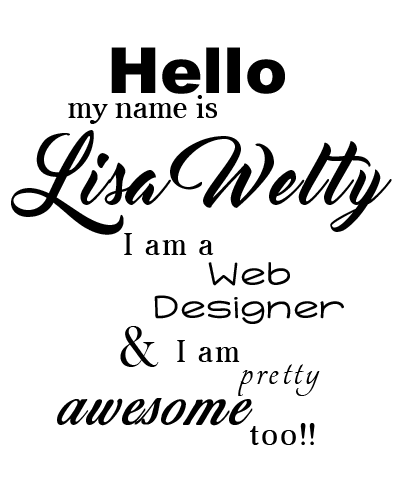
<style>
.page{position:relative;width:400px;height:489px;background:#ffffff}
.page>*{position:absolute;margin:0}
.t1{font:63.4px "Arial-Black";color:#000000}
.t2{font:31.3px "Aver";color:#000000}
.t3{font:70.6px "MasterOfBreak";letter-spacing:0.06em;color:#000000}
.t4{font:70.6px "MasterOfBreak";color:#000000}
.t5{font:31.3px "Aver";letter-spacing:0.06em;color:#000000}
.t6{font:36.6px "KGTightrope";letter-spacing:0.06em;color:#000000}
.t7{font:58.3px "BaskOldFace";color:#000000}
.t8{font:50.1px "Tangerine";letter-spacing:0.06em;color:#000000}
.t9{font:62.6px "BirdsofParadise";letter-spacing:0.06em;color:#000000}
</style>
<div class="page">
<p class="t1" style="left:111px;top:47px;width:174px;height:47px">Hello</p>
<p class="t2" style="left:68px;top:95px;width:149px;height:29px">my name is</p>
<p class="t3" style="left:11px;top:130px;width:381px;height:105px">L<span class="t4">is</span>a  Welty</p>
<p class="t5" style="left:124px;top:233px;width:90px;height:22px">I am a</p>
<p class="t6" style="left:154px;top:262px;width:190px;height:62px">Web Designer</p>
<p class="t7" style="left:120px;top:326px;width:39px;height:41px">&amp;</p>
<p class="t5" style="left:177px;top:340px;width:63px;height:22px">I am</p>
<p class="t8" style="left:238px;top:364px;width:82px;height:32px">pretty</p>
<p class="t9" style="left:57px;top:398px;width:196px;height:28px">awesome</p>
<p class="t5" style="left:250px;top:423px;width:65px;height:22px"><span class="t2"><br><br></span> <br>  too!!</p>
</div>
